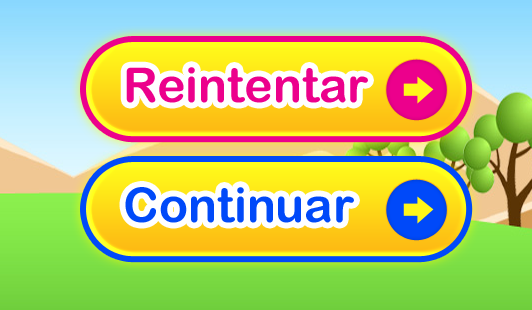
<style>
.page{position:relative;width:532px;height:310px}
.page>*{position:absolute;margin:0}
.t1{font:48px "ArialRoundedMTBold";color:#ec008c}
.t2{font:48px "ArialRoundedMTBold";color:#0049f9}
</style>
<div class="page">
<p class="t1" style="left:126px;top:67px;width:242px;height:36px">Reintentar</p>
<p class="t2" style="left:125px;top:187px;width:229px;height:36px">Continuar</p>
</div>
